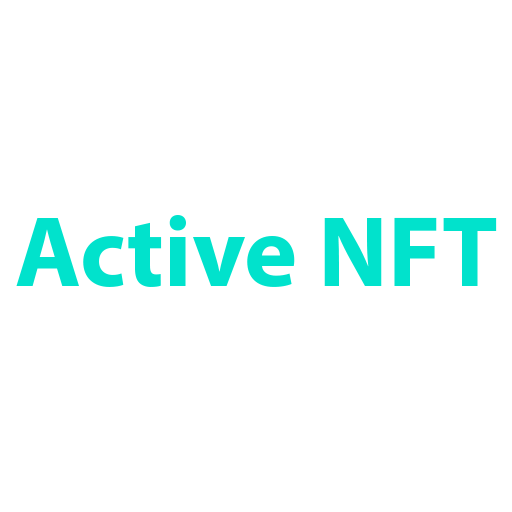
<style>
.page{position:relative;width:512px;height:512px;background:#ffffff}
.page>*{position:absolute;margin:0}
.t1{font:101.4px "MyriadPro-Bold";color:#01e2cc}
</style>
<div class="page">
<p class="t1" style="left:16px;top:215px;width:481px;height:72px">Active NFT</p>
</div>
